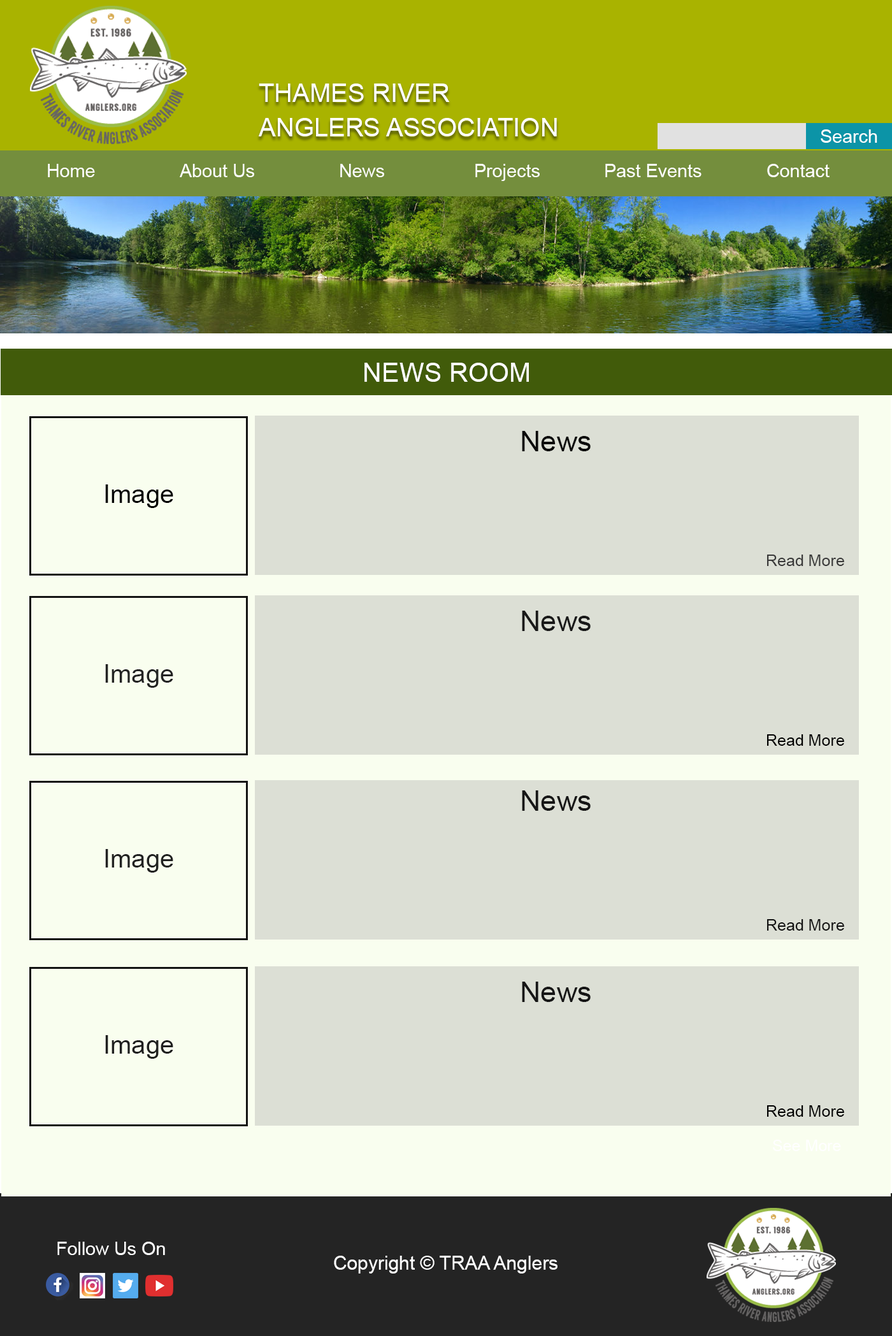
<style>
.page{position:relative;width:892px;height:1336px;background:#dcdfd5}
.page>*{position:absolute;margin:0}
.t1{font:25.5px/34.4px "ArialMT";color:#ffffff}
.t2{font:18.3px "ArialMT";color:#ffffff}
.t3{font:26.4px "ArialMT";color:#ffffff}
.t4{font:28.7px "ArialMT";color:#0b0b0b}
.t5{font:25.5px "ArialMT";color:#000000}
.t6{font:15.9px "ArialMT";color:#3a3a3a}
.t7{font:28.7px "ArialMT";color:#191919}
.t8{font:25.5px "ArialMT";color:#232323}
.t9{font:15.9px "ArialMT";color:#000000}
.t10{font:28.7px "ArialMT";color:#161616}
.t11{font:25.5px "ArialMT";color:#212121}
.t12{font:15.9px "ArialMT";color:#131313}
.t13{font:25.5px "ArialMT";color:#1f1f1f}
.t14{font:15.9px "ArialMT";color:#ffffff}
.t15{font:19.1px "ArialMT";color:#ffffff}
</style>
<div class="page">
<p class="t1" style="left:259px;top:84px;width:298px;height:52px">THAMES RIVER <br>ANGLERS ASSOCIATION</p>
<p class="t2" style="left:821px;top:129px;width:57px;height:14px">Search</p>
<p class="t2" style="left:48px;top:164px;width:47px;height:13px">Home</p>
<p class="t2" style="left:180px;top:164px;width:74px;height:13px">About Us</p>
<p class="t2" style="left:340px;top:164px;width:44px;height:13px">News</p>
<p class="t2" style="left:476px;top:164px;width:64px;height:17px">Projects</p>
<p class="t2" style="left:606px;top:164px;width:96px;height:13px">Past Events</p>
<p class="t2" style="left:768px;top:164px;width:62px;height:13px">Contact</p>
<p class="t3" style="left:365px;top:363px;width:164px;height:19px">NEWS ROOM</p>
<p class="t3" style="left:365px;top:363px;width:164px;height:19px">NEWS ROOM</p>
<p class="t4" style="left:522px;top:431px;width:69px;height:20px">News</p>
<p class="t4" style="left:522px;top:431px;width:69px;height:20px">News</p>
<p class="t5" style="left:105px;top:484px;width:68px;height:24px">Image</p>
<p class="t5" style="left:105px;top:484px;width:68px;height:24px">Image</p>
<p class="t6" style="left:768px;top:555px;width:77px;height:11px">Read More</p>
<p class="t6" style="left:768px;top:555px;width:77px;height:11px">Read More</p>
<p class="t7" style="left:522px;top:611px;width:69px;height:20px">News</p>
<p class="t7" style="left:522px;top:611px;width:69px;height:20px">News</p>
<p class="t8" style="left:105px;top:664px;width:68px;height:24px">Image</p>
<p class="t8" style="left:105px;top:664px;width:68px;height:24px">Image</p>
<p class="t9" style="left:768px;top:734px;width:77px;height:12px">Read More</p>
<p class="t9" style="left:768px;top:734px;width:77px;height:12px">Read More</p>
<p class="t10" style="left:522px;top:790px;width:69px;height:21px">News</p>
<p class="t11" style="left:105px;top:849px;width:68px;height:24px">Image</p>
<p class="t11" style="left:105px;top:849px;width:68px;height:24px">Image</p>
<p class="t12" style="left:768px;top:919px;width:77px;height:12px">Read More</p>
<p class="t12" style="left:768px;top:919px;width:77px;height:12px">Read More</p>
<p class="t10" style="left:522px;top:982px;width:69px;height:20px">News</p>
<p class="t10" style="left:522px;top:982px;width:69px;height:20px">News</p>
<p class="t13" style="left:105px;top:1035px;width:68px;height:24px">Image</p>
<p class="t13" style="left:105px;top:1035px;width:68px;height:24px">Image</p>
<p class="t9" style="left:768px;top:1105px;width:77px;height:12px">Read More</p>
<p class="t9" style="left:768px;top:1105px;width:77px;height:12px">Read More</p>
<p class="t14" style="left:773px;top:1140px;width:68px;height:11px">See More</p>
<p class="t14" style="left:773px;top:1140px;width:68px;height:11px">See More</p>
<p class="t2" style="left:57px;top:1242px;width:108px;height:13px">Follow Us On</p>
<p class="t15" style="left:334px;top:1256px;width:224px;height:18px">Copyright © TRAA Anglers</p>
</div>
